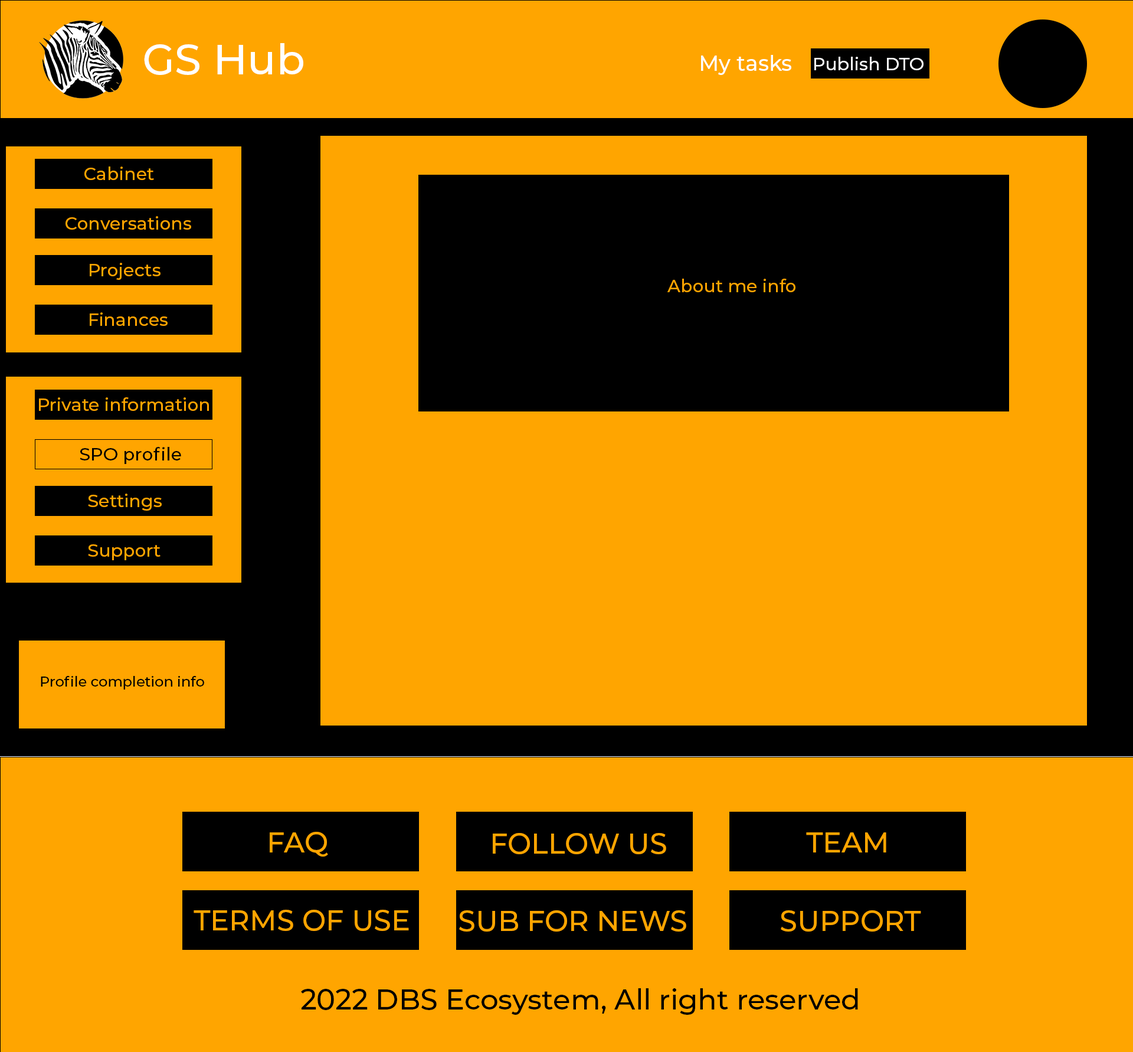
<style>
.page{position:relative;width:1133px;height:1052px;background:#ffa500}
.page>*{position:absolute;margin:0}
.t1{font:42.5px "Montserrat-Medium";color:#ffffff}
.t2{font:21.3px "Montserrat-Medium";color:#ffffff}
.t3{font:17.7px "Montserrat-Medium";color:#ffffff}
.t4{font:17.7px "Montserrat-Medium";color:#ffa500}
.t5{font:17.7px "Montserrat-Medium";color:#000000}
.t6{font:14.2px "Montserrat-Medium";color:#000000}
.t7{font:28.3px "Montserrat-Medium";color:#ffa500}
.t8{font:28.3px "Montserrat-Medium";color:#000000}
</style>
<div class="page">
<p class="t1" style="left:144px;top:43px;width:159px;height:32px">GS Hub</p>
<p class="t2" style="left:701px;top:55px;width:91px;height:20px">My tasks</p>
<p class="t3" style="left:815px;top:57px;width:109px;height:13px">Publish DTO</p>
<p class="t4" style="left:84px;top:166px;width:70px;height:14px">Cabinet</p>
<p class="t4" style="left:66px;top:216px;width:125px;height:14px">Conversations</p>
<p class="t4" style="left:90px;top:263px;width:71px;height:17px">Projects</p>
<p class="t4" style="left:668px;top:279px;width:128px;height:13px">About me info</p>
<p class="t4" style="left:90px;top:312px;width:78px;height:14px">Finances</p>
<p class="t4" style="left:39px;top:397px;width:170px;height:14px">Private information</p>
<p class="t5" style="left:80px;top:447px;width:101px;height:17px">SPO profile</p>
<p class="t4" style="left:88px;top:494px;width:74px;height:17px">Settings</p>
<p class="t4" style="left:88px;top:544px;width:73px;height:16px">Support</p>
<p class="t6" style="left:41px;top:676px;width:163px;height:14px">Profile completion info</p>
<p class="t7" style="left:270px;top:832px;width:58px;height:25px">FAQ</p>
<p class="t7" style="left:493px;top:833px;width:174px;height:21px">FOLLOW US</p>
<p class="t7" style="left:806px;top:832px;width:81px;height:20px">TEAM</p>
<p class="t7" style="left:194px;top:910px;width:215px;height:21px">TERMS OF USE</p>
<p class="t7" style="left:459px;top:910px;width:228px;height:22px">SUB FOR NEWS</p>
<p class="t7" style="left:781px;top:910px;width:141px;height:22px">SUPPORT</p>
<p class="t8" style="left:301px;top:988px;width:557px;height:27px">2022 DBS Ecosystem, All right reserved</p>
</div>
